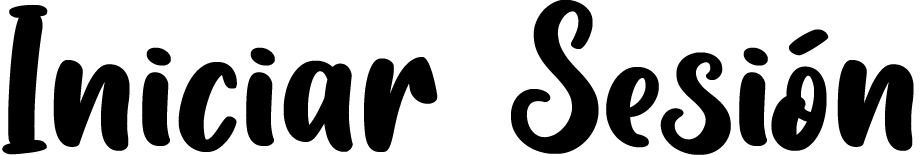
<style>
.page{position:relative;width:920px;height:155px;background:#ffffff}
.page>*{position:absolute;margin:0}
.t1{font:160px "HelloSunshinePersonalUse";color:#000000}
</style>
<div class="page">
<p class="t1" style="left:2px;top:0px;width:912px;height:155px">Iniciar Sesión</p>
</div>
